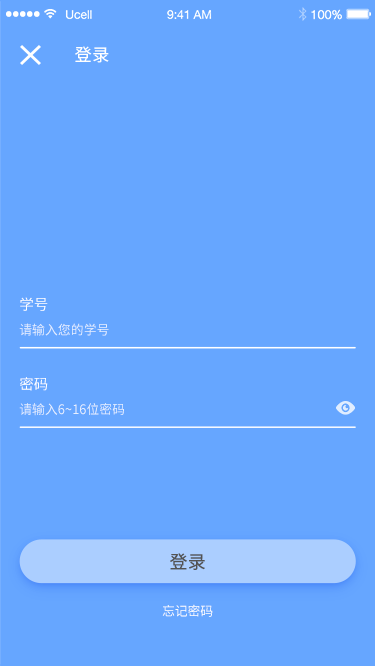
<style>
.page{position:relative;width:375px;height:667px;background:#66a6ff}
.page>*{position:absolute;margin:0}
.t1{font:17.4px "NotoSansHans-Regular";color:#ffffff}
.t2{font:14.6px "NotoSansHans-Regular";color:#ffffff;text-transform:uppercase}
.t3{font:12.9px "NotoSansHans-Regular";color:#e6efff;text-transform:uppercase}
.t4{font:17.9px "NotoSansHans-Regular";letter-spacing:0.02em;color:#535353}
.t5{font:12.9px "NotoSansHans-Regular";letter-spacing:-0.02em;color:#ffffff}
</style>
<div class="page">
<p class="t1" style="left:75px;top:46px;width:34px;height:17px">登录</p>
<p class="t2" style="left:20px;top:297px;width:28px;height:14px">学号</p>
<p class="t3" style="left:19px;top:323px;width:90px;height:13px">请输入您的学号</p>
<p class="t2" style="left:20px;top:377px;width:28px;height:14px">密码</p>
<p class="t3" style="left:19px;top:403px;width:105px;height:13px">请输入6~16位密码</p>
<p class="t4" style="left:170px;top:553px;width:35px;height:17px">登录</p>
<p class="t4" style="left:170px;top:553px;width:35px;height:17px">登录</p>
<p class="t5" style="left:162px;top:604px;width:51px;height:13px">忘记密码</p>
</div>
